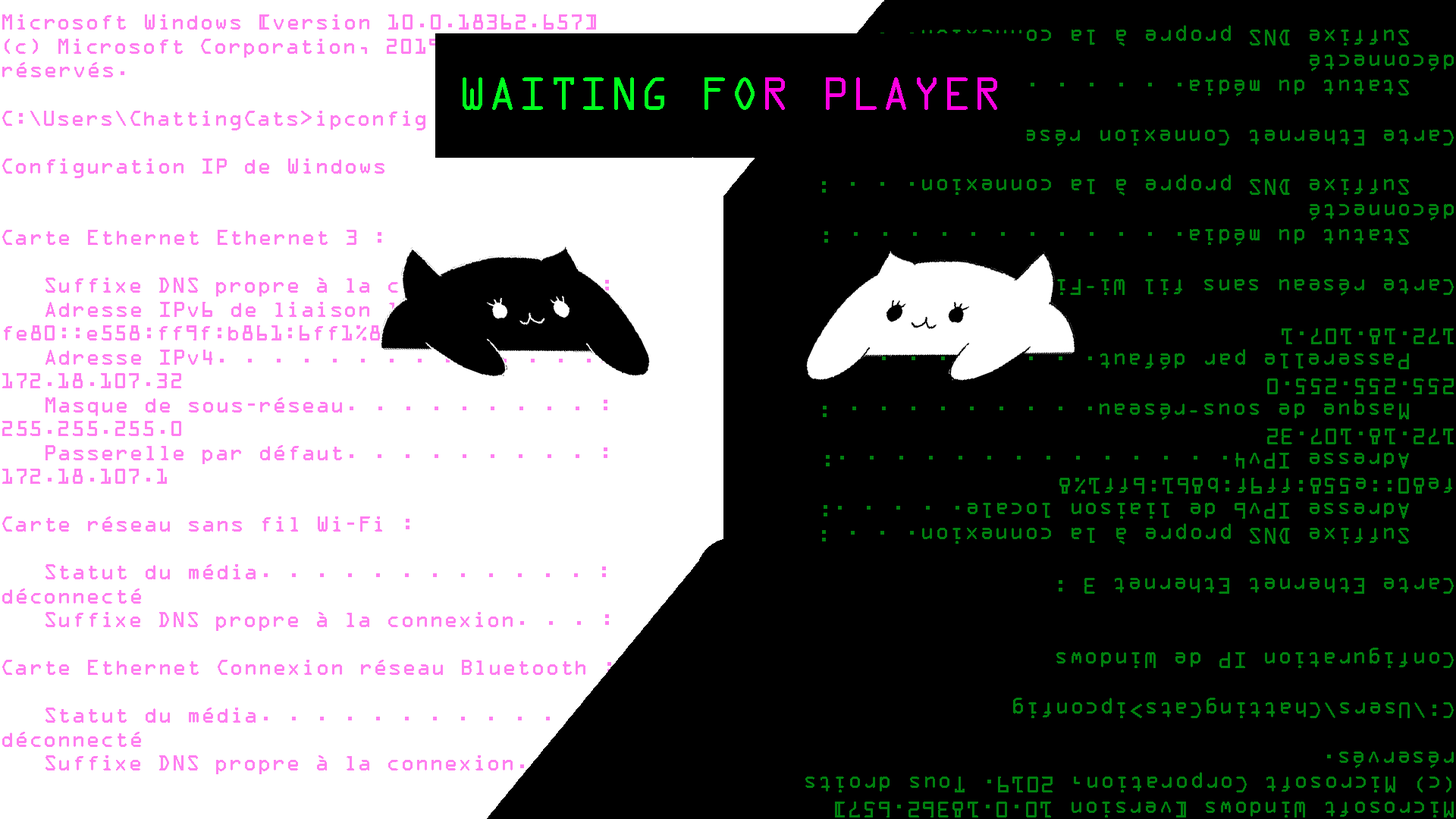
<style>
.page{position:relative;width:1456px;height:819px;background:#000000}
.page>*{position:absolute;margin:0}
.t1{font:20.7px "OCRAStd";color:#00800f}
.t2{font:42px "OCRAStd";color:#00ff1e}
.t3{font:42px "OCRAStd";color:#ff00e1}
.t4{font:63px "OCRAStd";color:#000000}
</style>
<div class="page">
<p class="t1" style="left:701px;top:25px;width:753px;height:792px;rotate:180deg">Microsoft Windows [version 10.0.18362.657]<br>(c) Microsoft Corporation, 2019. Tous droits réservés.<br><br>C:\Users\ChattingCats&gt;ipconfig<br><br>Configuration IP de Windows<br><br><br>Carte Ethernet Ethernet 3 :<br><br>   Suffixe DNS propre à la connexion. . . : uqac.ca<br>   Adresse IPv6 de liaison locale. . . . .: fe80::e558:ff9f:b861:6ff1%8<br>   Adresse IPv4. . . . . . . . . . . . . .: 172.18.107.32<br>   Masque de sous-réseau. . . . . . . . . : 255.255.255.0<br>   Passerelle par défaut. . . . . . . . . : 172.18.107.1<br><br>Carte réseau sans fil Wi-Fi :<br><br>   Statut du média. . . . . . . . . . . . : Média déconnecté<br>   Suffixe DNS propre à la connexion. . . :<br><br>Carte Ethernet Connexion réseau Bluetooth :<br><br>   Statut du média. . . . . . . . . . . . : Média déconnecté<br>   Suffixe DNS propre à la connexion. . . :</p>
<p class="t2" style="left:463px;top:77px;width:534px;height:33px;text-align:center">WAITING FO<span class="t3">R PLAYER<br>   </span><span class="t4">.</span></p>
</div>
